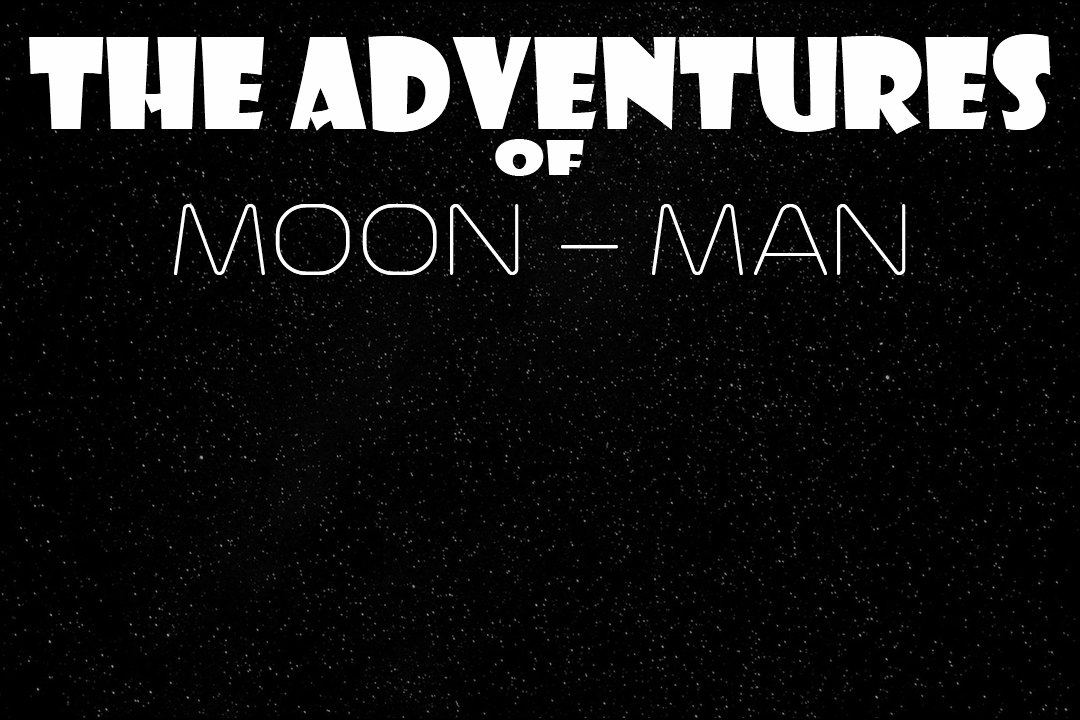
<style>
.page{position:relative;width:1080px;height:720px;background:#010101}
.page>*{position:absolute;margin:0}
.t1{font:121.9px "ShowcardGothic-Reg";color:#fefefe}
.t2{font:45.8px "ShowcardGothic-Reg";color:#fefefe;scale:1.6 1}
.t3{font:126.6px "Trench-Thin";color:#fefefe}
</style>
<div class="page">
<p class="t1" style="left:29px;top:34px;width:1022px;height:100px">THE ADVENTURES</p>
<p class="t2" style="left:495px;top:139px;width:89px;height:37px">OF</p>
<p class="t3" style="left:174px;top:204px;width:732px;height:71px">MOON - MAN</p>
</div>
